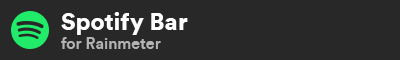
<style>
.page{position:relative;width:400px;height:60px;background:#282828}
.page>*{position:absolute;margin:0}
.t1{font:16px "Circular-Medium";color:#b3b3b3}
.t2{font:24px "Circular-Black";color:#ffffff}
</style>
<div class="page">
<p class="t1" style="left:61px;top:12px;width:127px;height:37px"><span class="t2">Spotify Bar<br></span>for Rainmeter</p>
</div>
